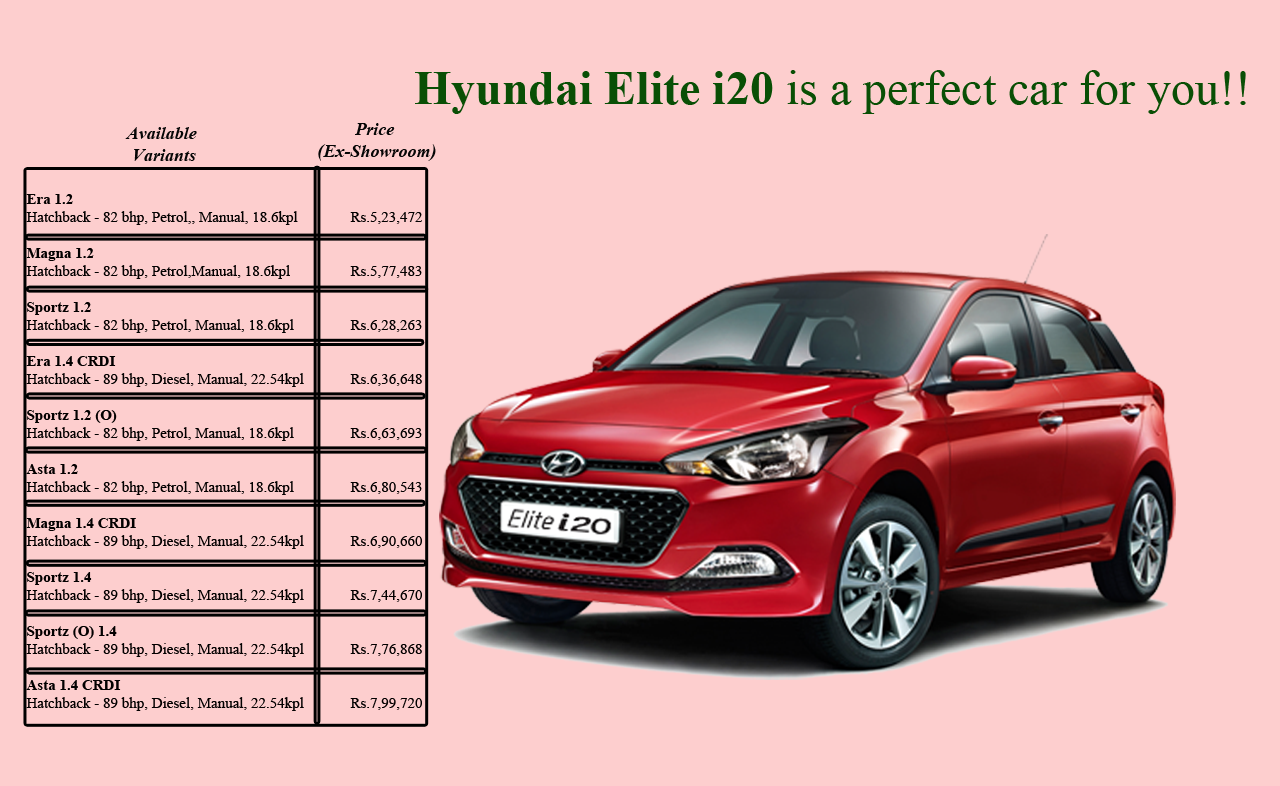
<style>
.page{position:relative;width:1280px;height:786px;background:#fdcece}
.page>*{position:absolute;margin:0}
.t1{font:48px "TimesNewRomanPSMT";color:#094f05}
.t2{font:48px "TimesNewRomanPS-BoldMT";color:#094f05}
.t3{font:18px "TimesNewRomanPS-BoldItalicMT";color:#060606}
.t4{font:15px "TimesNewRomanPSMT";color:#030000}
.t5{font:15px "TimesNewRomanPS-BoldMT";color:#030000}
</style>
<div class="page">
<p class="t1" style="left:415px;top:70px;width:831px;height:44px"><span class="t2">Hyundai Elite i20</span> is a perfect car for you!!</p>
<p class="t3" style="left:318px;top:123px;width:118px;height:38px;text-align:center">Price <br>(Ex-Showroom)</p>
<p class="t3" style="left:125px;top:127px;width:72px;height:34px;text-align:center">Available <br>Variants</p>
<p class="t4" style="left:26px;top:194px;width:396px;height:517px"><span class="t5">Era 1.2<br></span>Hatchback - 82 bhp, Petrol,, Manual, 18.6kpl  Rs.5,23,472 <br><span class="t5"><br>Magna 1.2<br></span>Hatchback - 82 bhp, Petrol,Manual, 18.6kpl  Rs.5,77,483 <br><span class="t5"><br>Sportz 1.2<br></span>Hatchback - 82 bhp, Petrol, Manual, 18.6kpl  Rs.6,28,263 <br><span class="t5"><br>Era 1.4 CRDI<br></span>Hatchback - 89 bhp, Diesel, Manual, 22.54kpl  Rs.6,36,648 <br><span class="t5"><br>Sportz 1.2 (O)<br></span>Hatchback - 82 bhp, Petrol, Manual, 18.6kpl  Rs.6,63,693 <br><span class="t5"><br>Asta 1.2<br></span>Hatchback - 82 bhp, Petrol, Manual, 18.6kpl  Rs.6,80,543 <br><span class="t5"><br>Magna 1.4 CRDI<br></span>Hatchback - 89 bhp, Diesel, Manual, 22.54kpl  Rs.6,90,660 <br><span class="t5"><br>Sportz 1.4<br></span>Hatchback - 89 bhp, Diesel, Manual, 22.54kpl  Rs.7,44,670 <br><span class="t5"><br>Sportz (O) 1.4<br></span>Hatchback - 89 bhp, Diesel, Manual, 22.54kpl  Rs.7,76,868 <br><span class="t5"><br>Asta 1.4 CRDI<br></span>Hatchback - 89 bhp, Diesel, Manual, 22.54kpl  Rs.7,99,720</p>
</div>
